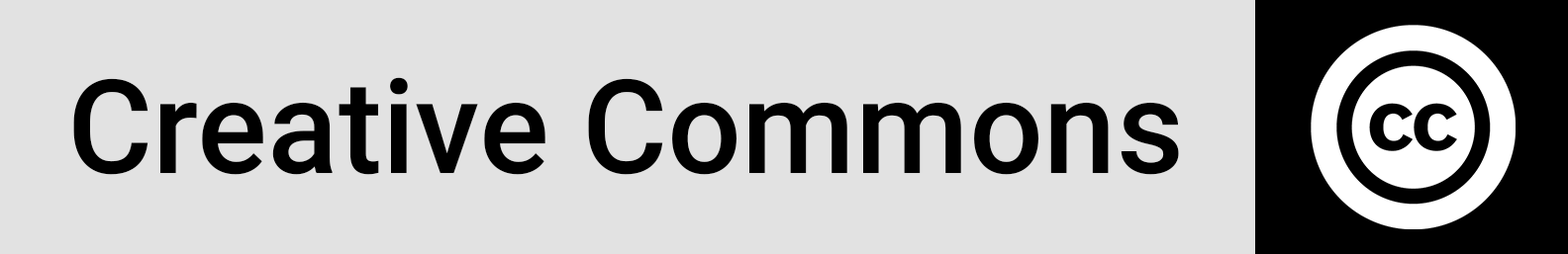
<style>
.page{position:relative;width:1568px;height:254px;background:#e2e2e2}
.page>*{position:absolute;margin:0}
.t1{font:130.7px "Roboto-Medium";color:#000000}
</style>
<div class="page">
<p class="t1" style="left:73px;top:77px;width:1106px;height:98px">Creative Commons</p>
</div>
